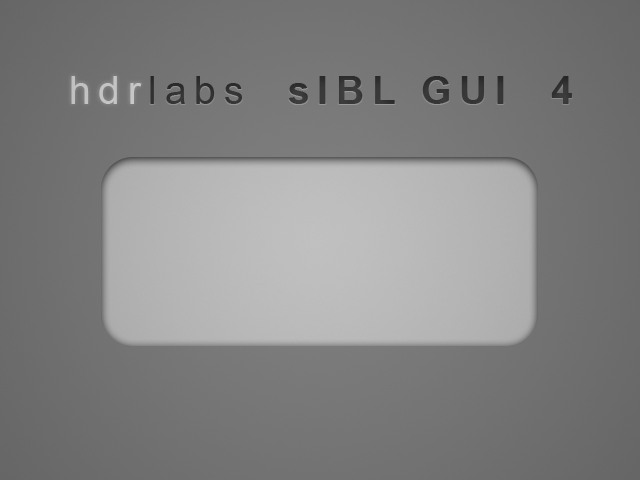
<style>
.page{position:relative;width:640px;height:480px}
.page>*{position:absolute;margin:0}
.t1{font:38.9px "Arial-BoldMT";letter-spacing:0.2em;color:#101010}
.t2{font:38.9px "ArialMT";letter-spacing:0.2em;color:#404040}
.t3{font:38.9px "ArialMT";letter-spacing:0.2em;color:#101010}
.t4{font:38.9px "ArialMT";letter-spacing:0.2em;color:#c4c4c3}
</style>
<div class="page">
<p class="t1" style="left:71px;top:76px;width:501px;height:28px"><span class="t2">hdr</span><span class="t3">labs  </span>sIBL GUI  4</p>
<p class="t4" style="left:71px;top:76px;width:71px;height:28px">hdr</p>
</div>
